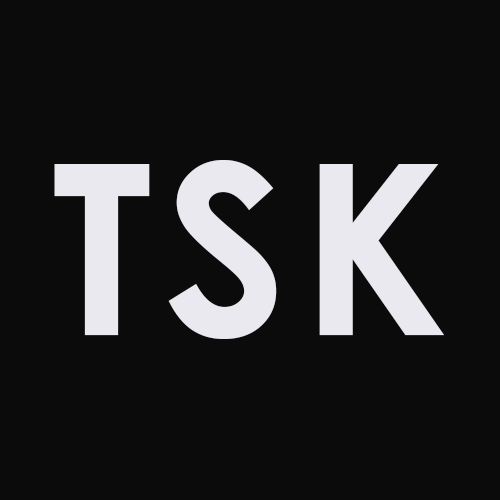
<style>
.page{position:relative;width:500px;height:500px;background:#0b0b0b}
.page>*{position:absolute;margin:0}
.t1{font:238.1px "CenturyGothic-Bold";letter-spacing:0.05em;color:#eae9ef}
</style>
<div class="page">
<p class="t1" style="left:54px;top:160px;width:390px;height:179px">TSK</p>
</div>
